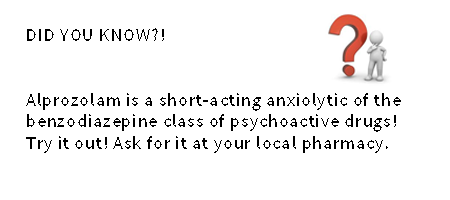
<style>
.page{position:relative;width:450px;height:200px;background:#ffffff}
.page>*{position:absolute;margin:0}
.t1{font:18px "SourceSansPro-Regular";letter-spacing:0.05em;color:#000000}
</style>
<div class="page">
<p class="t1" style="left:26px;top:28px;width:375px;height:125px">DID YOU KNOW?!<br><br><br>Alprozolam is a short-acting anxiolytic of the benzodiazepine class of psychoactive drugs!<br>Try it out! Ask for it at your local pharmacy.</p>
</div>
